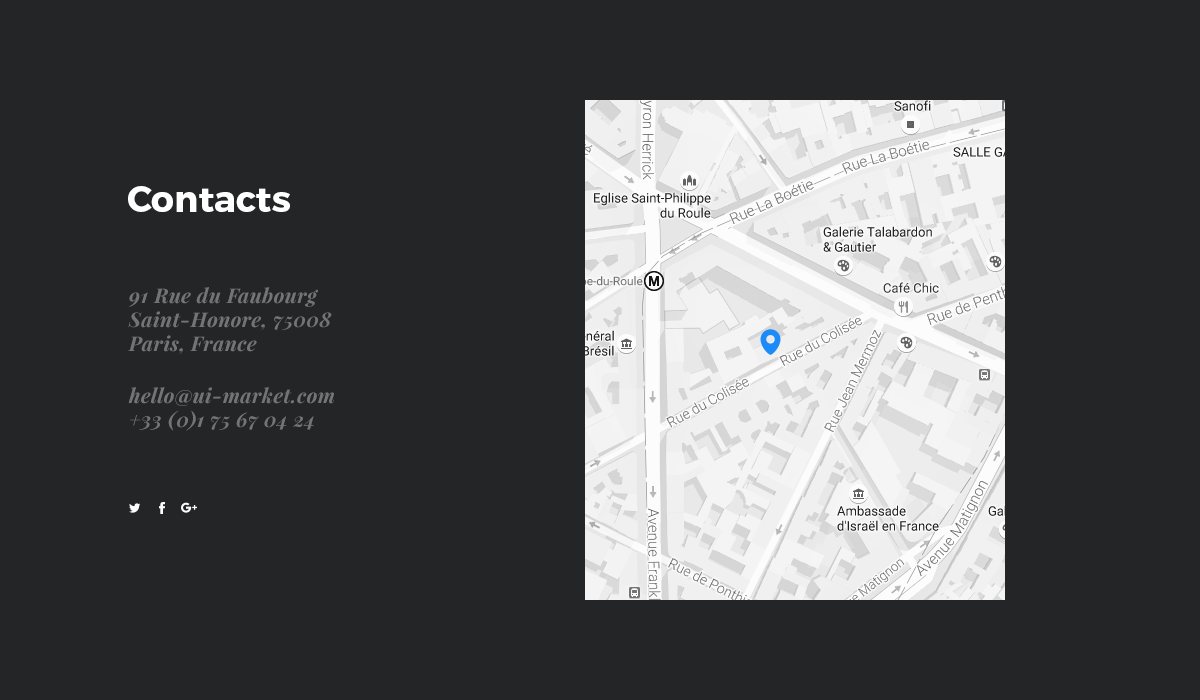
<style>
.page{position:relative;width:1200px;height:700px;background:#242526}
.page>*{position:absolute;margin:0}
.t1{font:36px "Montserrat-Bold";color:#ffffff}
.t2{font:20px "PlayfairDisplay-BoldItalic";letter-spacing:0.025em;color:#747474}
</style>
<div class="page">
<p class="t1" style="left:128px;top:186px;width:162px;height:26px">Contacts</p>
<p class="t2" style="left:128px;top:287px;width:204px;height:67px">91 Rue du Faubourg Saint-Honore, 75008 Paris, France</p>
<p class="t2" style="left:128px;top:387px;width:206px;height:44px">hello@ui-market.com<br>+33 (0)1 75 67 04 24</p>
</div>
